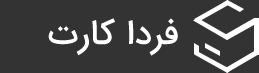
<style>
.page{position:relative;width:259px;height:73px;background:#333333}
.page>*{position:absolute;margin:0}
.t1{font:35px "IRANSansWeb-Medium";letter-spacing:0.005em;color:#ffffff}
</style>
<div class="page">
<p class="t1" style="left:48px;top:18px;width:130px;height:38px">فردا کارت</p>
</div>
